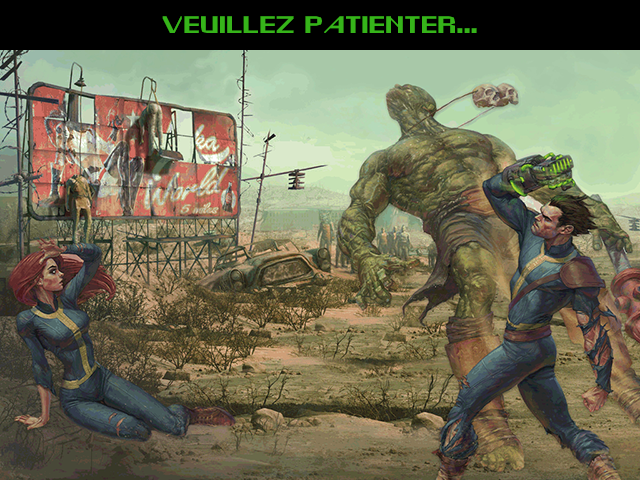
<style>
.page{position:relative;width:640px;height:480px}
.page>*{position:absolute;margin:0}
.t1{font:19px "JHFallout";color:#36b41a}
</style>
<div class="page">
<p class="t1" style="left:162px;top:16px;width:315px;height:17px">VEUILLEZ PATIENTER...</p>
</div>
